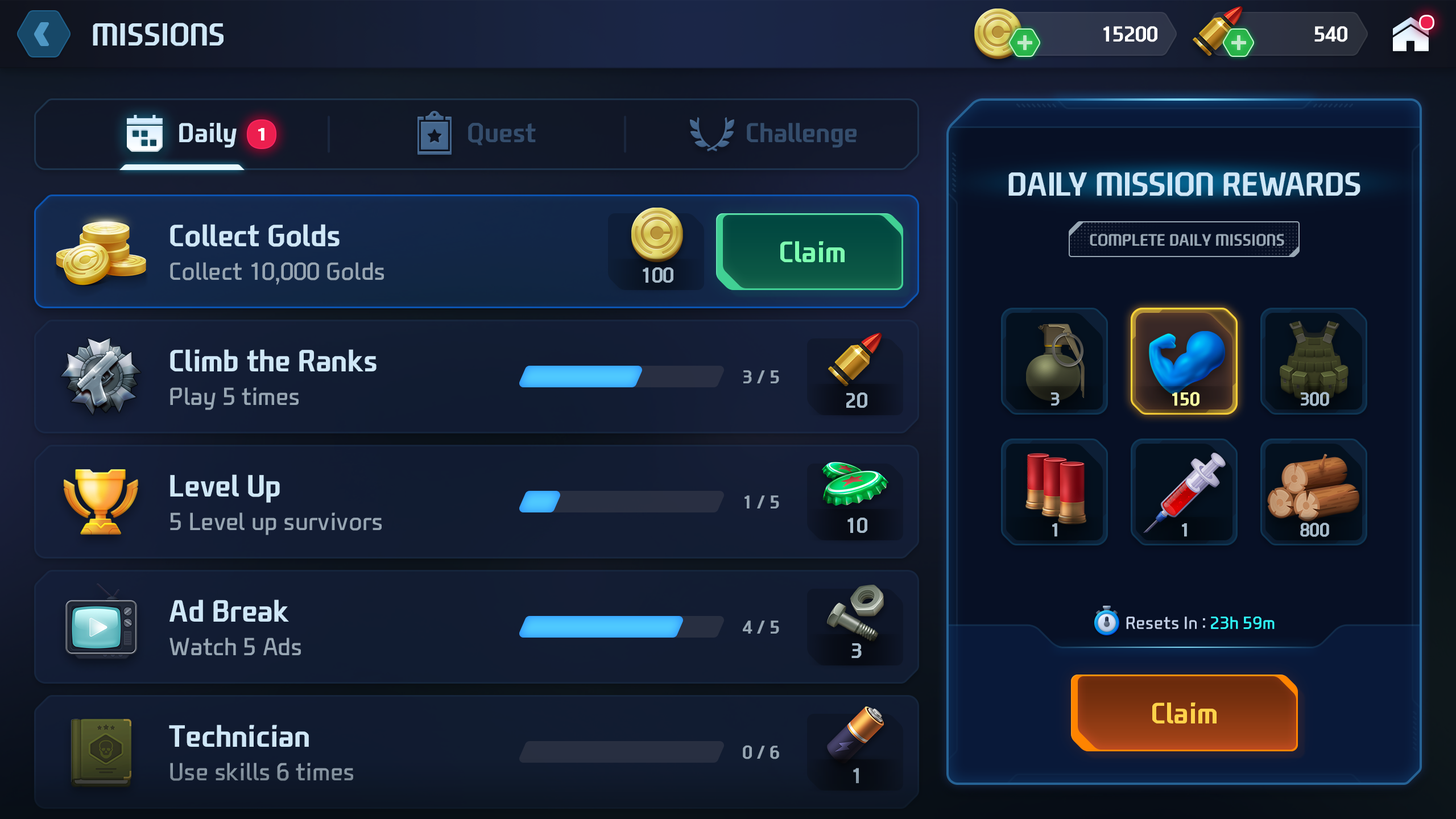
<style>
.page{position:relative;width:1456px;height:819px}
.page>*{position:absolute;margin:0}
.t1{font:30.6px "NEXONFootballGothicB";color:#cfe7f7;text-transform:uppercase}
.t2{font:20.7px "NEXONFootballGothicB";color:#ffffff;text-transform:uppercase}
.t3{font:26.2px "NEXONFootballGothicB";color:#cfe7f7}
.t4{font:26.2px "NEXONFootballGothicB";color:#344d6c}
.t5{font:17.2px "NEXONFootballGothicB";color:#ffffff;text-transform:uppercase;scale:1.37 1}
.t6{font:31.8px "NEXONFootballGothicB";color:#cfe7f7;text-transform:uppercase}
.t7{font:29.6px/125.1px "NEXONFootballGothicB";color:#cfe7f7}
.t8{font:15.9px "NEXONFootballGothicB";color:#97a6b3;text-transform:uppercase}
.t9{font:28.4px "NEXONFootballGothicB";color:#7effb1}
.t10{font:23.9px/125.1px "NEXONFootballGothicL";color:#97a6b3}
.t11{font:20.5px "NEXONFootballGothicB";color:#a7bbca;text-transform:uppercase}
.t12{font:17.9px "NEXONFootballGothicB";color:#97a6b3}
.t13{font:17.9px "NEXONFootballGothicB";color:#a7bbca;text-transform:uppercase}
.t14{font:17.9px "NEXONFootballGothicB";color:#faffa3;text-transform:uppercase}
.t15{font:17.1px "NEXONFootballGothicL";letter-spacing:-0.01em;color:#c3d0e7}
.t16{font:17.1px "NEXONFootballGothicL";letter-spacing:-0.01em;color:#30fdff}
.t17{font:28.4px "NEXONFootballGothicB";color:#ffd24a}
.t18{font:20.5px "NEXONFootballGothicB";color:#8fa1af;text-transform:uppercase}
</style>
<div class="page">
<p class="t1" style="left:93px;top:23px;width:131px;height:23px">Missions</p>
<p class="t2" style="left:1103px;top:26px;width:54px;height:16px">15200</p>
<p class="t2" style="left:1314px;top:26px;width:33px;height:16px">540</p>
<p class="t3" style="left:179px;top:123px;width:58px;height:25px">Daily</p>
<p class="t4" style="left:468px;top:123px;width:68px;height:23px">Quest</p>
<p class="t4" style="left:747px;top:123px;width:110px;height:25px">Challenge</p>
<p class="t5" style="left:258px;top:128px;width:6px;height:12px">1</p>
<p class="t6" style="left:1008px;top:172px;width:352px;height:24px">Daily Mission Rewards</p>
<p class="t7" style="left:169px;top:224px;width:208px;height:523px">Collect Golds<br>Climb the Ranks<br>Level Up<br>Ad Break<br>Technician</p>
<p class="t8" style="left:1090px;top:234px;width:194px;height:12px">Complete Daily Missions</p>
<p class="t9" style="left:780px;top:241px;width:65px;height:21px">Claim</p>
<p class="t10" style="left:169px;top:262px;width:215px;height:519px">Collect 10,000 Golds<br>Play 5 times<br>5 Level up survivors<br>Watch 5 Ads<br>Use skills 6 times</p>
<p class="t11" style="left:643px;top:267px;width:30px;height:16px">100</p>
<p class="t12" style="left:743px;top:370px;width:36px;height:13px">3 / 5</p>
<p class="t11" style="left:846px;top:392px;width:21px;height:16px">20</p>
<p class="t13" style="left:1051px;top:392px;width:9px;height:14px">3</p>
<p class="t14" style="left:1172px;top:392px;width:27px;height:14px">150</p>
<p class="t13" style="left:1301px;top:392px;width:28px;height:14px">300</p>
<p class="t12" style="left:744px;top:495px;width:35px;height:13px">1 / 5</p>
<p class="t11" style="left:847px;top:518px;width:20px;height:15px">10</p>
<p class="t13" style="left:1052px;top:523px;width:5px;height:14px">1</p>
<p class="t13" style="left:1182px;top:523px;width:5px;height:14px">1</p>
<p class="t13" style="left:1300px;top:523px;width:29px;height:14px">800</p>
<p class="t15" style="left:1126px;top:617px;width:149px;height:12px">Resets In : <span class="t16">23h 59m</span></p>
<p class="t12" style="left:743px;top:620px;width:36px;height:14px">4 / 5</p>
<p class="t11" style="left:851px;top:643px;width:11px;height:15px">3</p>
<p class="t17" style="left:1152px;top:702px;width:65px;height:21px">Claim</p>
<p class="t12" style="left:743px;top:745px;width:36px;height:14px">0 / 6</p>
<p class="t18" style="left:853px;top:768px;width:6px;height:15px">1</p>
</div>
